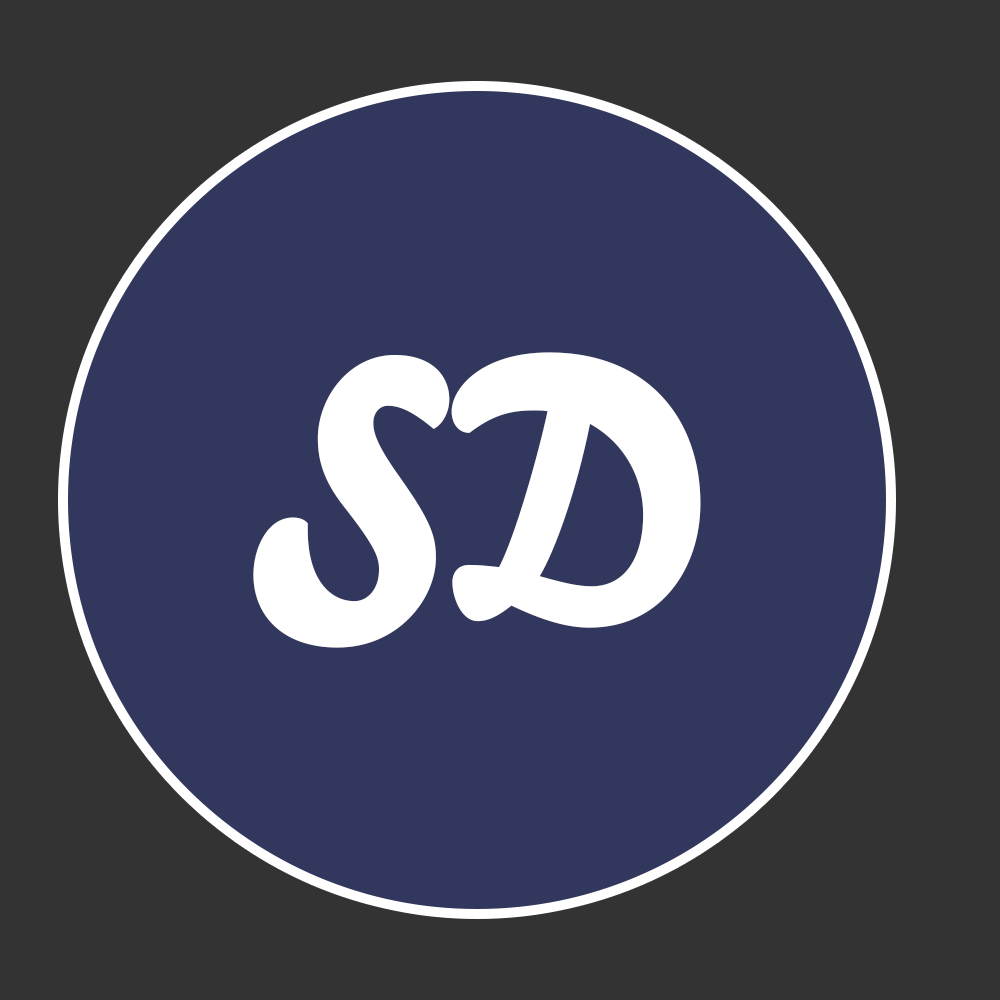
<style>
.page{position:relative;width:1000px;height:1000px;background:#32375d}
.page>*{position:absolute;margin:0}
.t1{font:362px "Bello-Pro";color:#ffffff}
</style>
<div class="page">
<p class="t1" style="left:253px;top:352px;width:448px;height:296px">SD</p>
</div>
